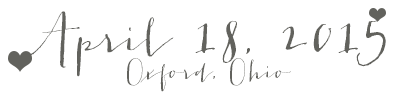
<style>
.page{position:relative;width:400px;height:92px;background:#ffffff}
.page>*{position:absolute;margin:0}
.t1{font:48px "JacquesGilles";color:#62625d}
.t2{font:24px "JacquesGilles";color:#62625d}
</style>
<div class="page">
<p class="t1" style="left:26px;top:11px;width:360px;height:81px;text-align:center">April 18, 2015<br><span class="t2">Oxford, Ohio</span></p>
</div>
